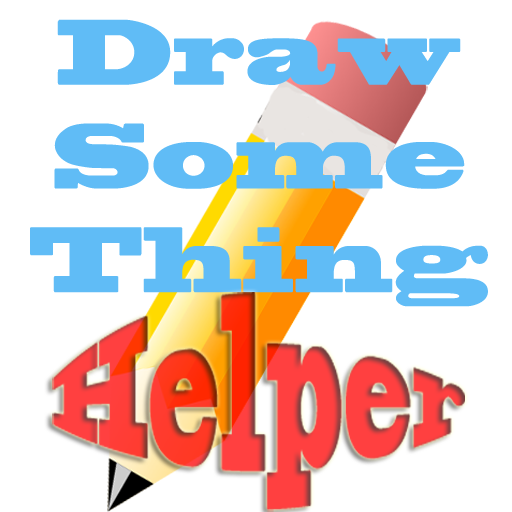
<style>
.page{position:relative;width:512px;height:512px;background:#ffffff}
.page>*{position:absolute;margin:0}
.t1{font:86.4px "BlackoakStd";color:#60bcf6;scale:0.72 1}
</style>
<div class="page">
<p class="t1" style="left:30px;top:19px;width:458px;height:288px;text-align:center">Draw Some<br>Thing</p>
</div>
